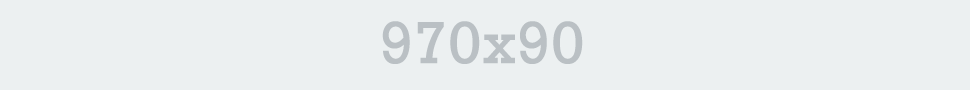
<style>
.page{position:relative;width:970px;height:90px;background:#ecf0f1}
.page>*{position:absolute;margin:0}
.t1{font:60px "Rockwell";color:#bac0c4;font-weight:bold}
</style>
<div class="page">
<p class="t1" style="left:382px;top:21px;width:201px;height:43px">970x90</p>
</div>
